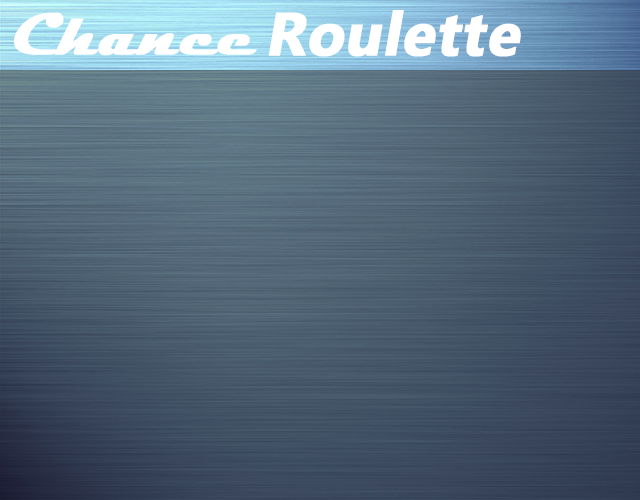
<style>
.page{position:relative;width:640px;height:500px}
.page>*{position:absolute;margin:0}
.t1{font:60px "Magneto-Bold";color:#ffffff;font-weight:bold;font-style:italic}
.t2{font:60.8px "MyanmarText-Bold";color:#ffffff;font-weight:bold;font-style:italic}
</style>
<div class="page">
<p class="t1" style="left:14px;top:12px;width:243px;height:44px">Chance</p>
<p class="t2" style="left:268px;top:10px;width:253px;height:47px">Roulette</p>
</div>
